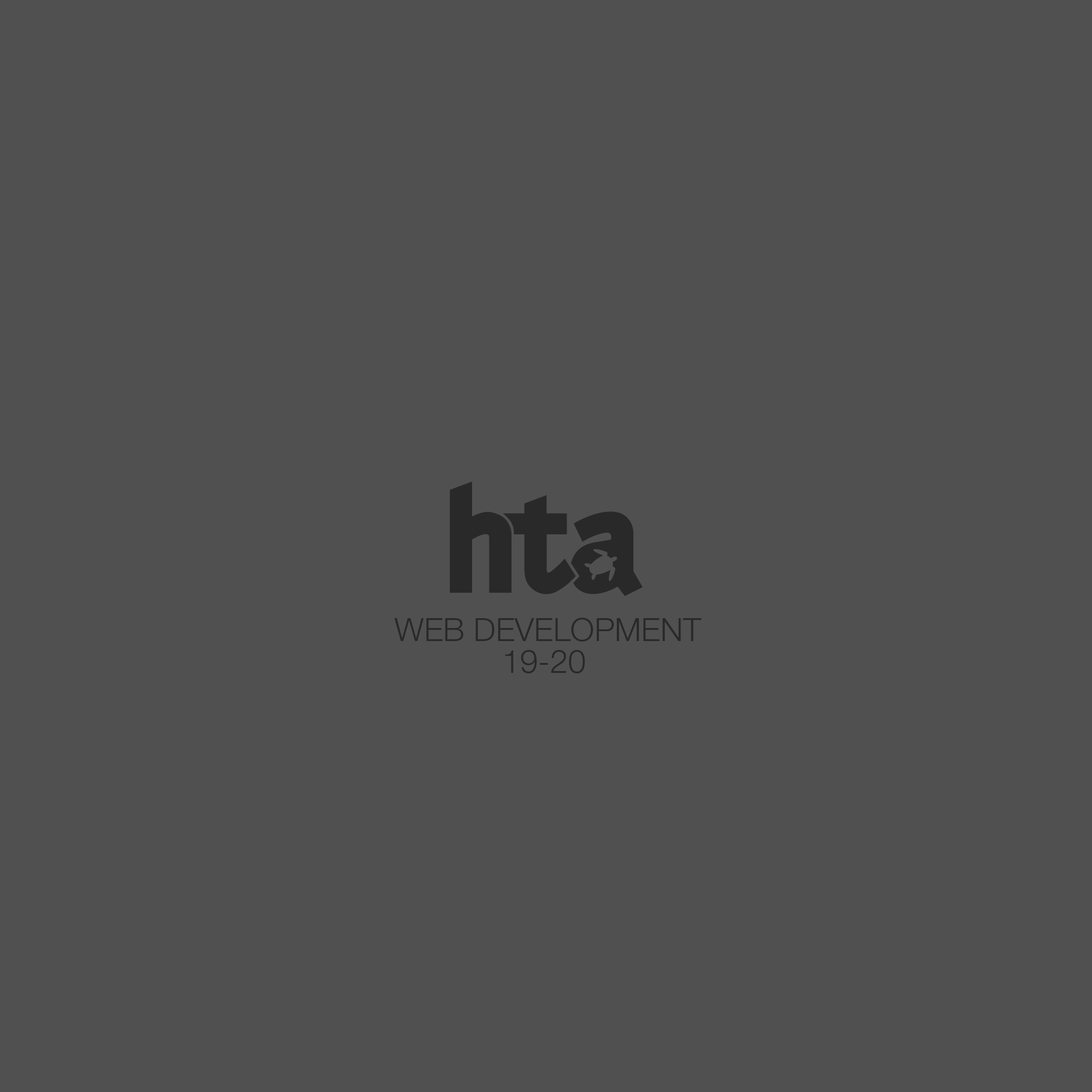
<style>
.page{position:relative;width:1092px;height:1092px;background:#505050}
.page>*{position:absolute;margin:0}
.t1{font:32.3px "HelveticaNeue-Light";color:#292929}
</style>
<div class="page">
<p class="t1" style="left:394px;top:618px;width:308px;height:23px">WEB DEVELOPMENT</p>
<p class="t1" style="left:505px;top:650px;width:80px;height:23px">19-20</p>
</div>
